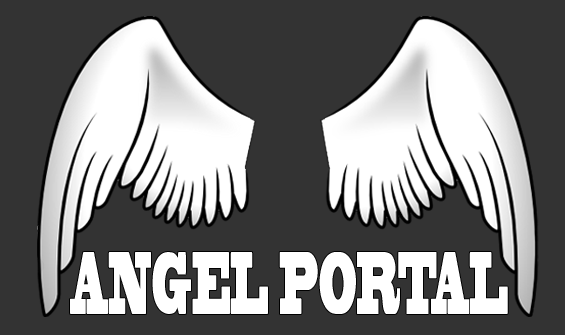
<style>
.page{position:relative;width:565px;height:335px;background:#333333}
.page>*{position:absolute;margin:0}
.t1{font:83.3px "BlackoakStd";color:#ffffff;scale:0.26 1}
</style>
<div class="page">
<p class="t1" style="left:70px;top:252px;width:438px;height:62px">ANGEL PORTAL</p>
</div>
